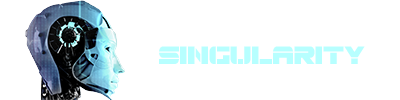
<style>
.page{position:relative;width:400px;height:100px;background:#ffffff}
.page>*{position:absolute;margin:0}
.t1{font:25px "Spac3tech";color:#b7ffff}
</style>
<div class="page">
<p class="t1" style="left:159px;top:46px;width:206px;height:18px">singularity</p>
</div>
